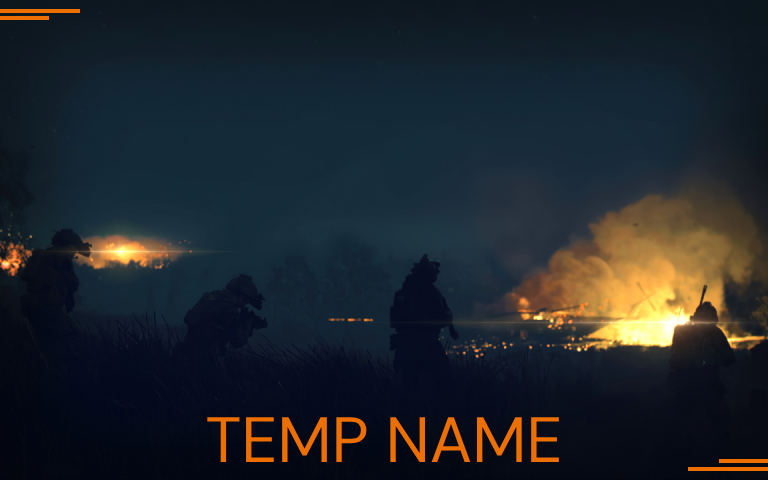
<style>
.page{position:relative;width:768px;height:480px}
.page>*{position:absolute;margin:0}
.t1{font:64px "DMSans-Regular";color:#ec6f00}
</style>
<div class="page">
<p class="t1" style="left:207px;top:417px;width:352px;height:45px">TEMP NAME</p>
</div>
